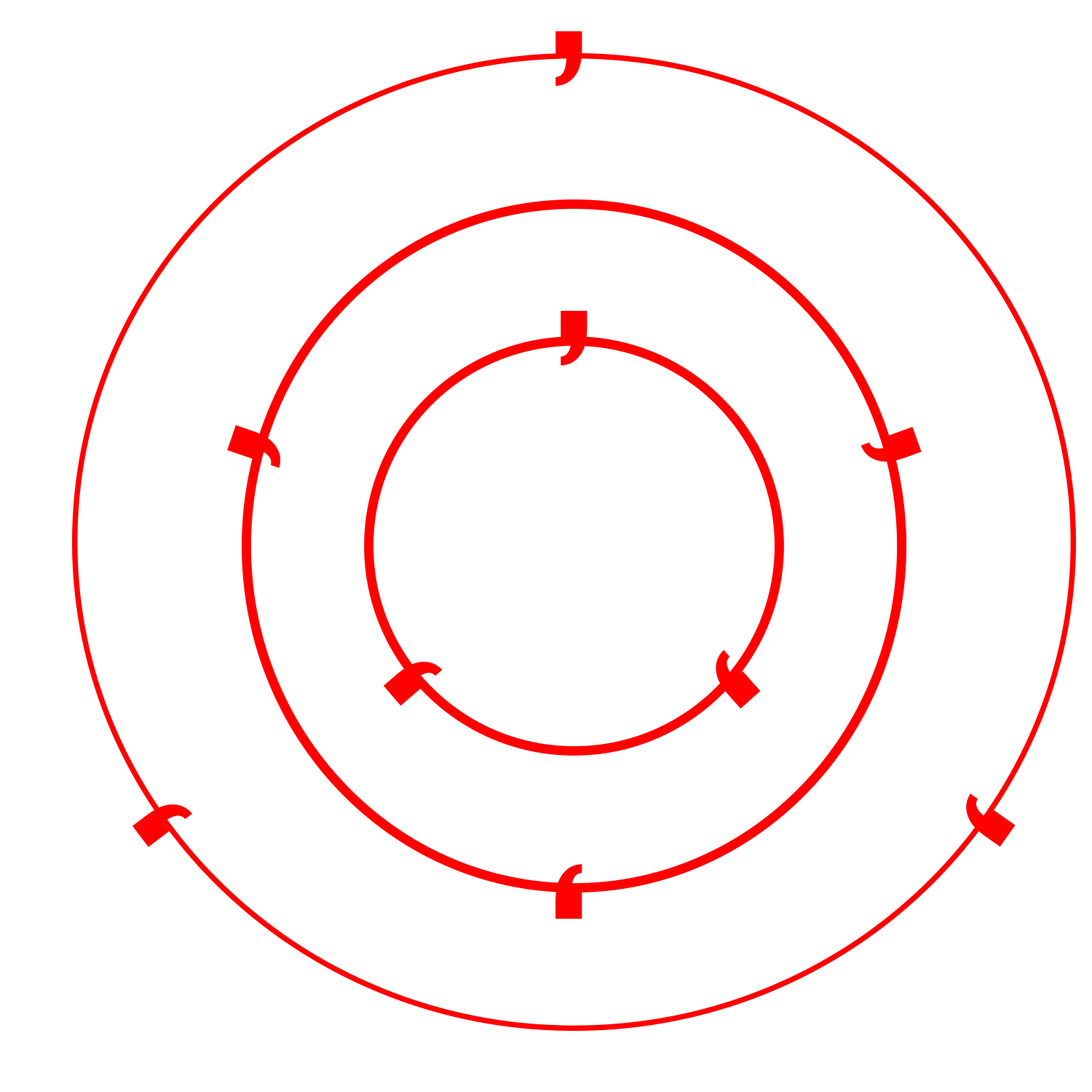
<style>
.page{position:relative;width:1092px;height:1092px;background:#ffffff}
.page>*{position:absolute;margin:0}
.t1{font:182px "LucidaSans-Typewriter";color:#ff0000}
</style>
<div class="page">
<p class="t1" style="left:555px;top:31px;width:27px;height:55px">,</p>
<p class="t1" style="left:561px;top:311px;width:26px;height:54px">,</p>
<p class="t1" style="left:227px;top:425px;width:54px;height:43px;rotate:-71deg">,</p>
<p class="t1" style="left:860px;top:427px;width:62px;height:35px;rotate:70deg">,</p>
<p class="t1" style="left:716px;top:649px;width:45px;height:60px;rotate:138deg">,</p>
<p class="t1" style="left:383px;top:662px;width:60px;height:44px;rotate:-131deg">,</p>
<p class="t1" style="left:966px;top:794px;width:50px;height:53px;rotate:125deg">,</p>
<p class="t1" style="left:132px;top:804px;width:60px;height:43px;rotate:-127deg">,</p>
<p class="t1" style="left:555px;top:864px;width:27px;height:55px;rotate:180deg">,</p>
</div>
